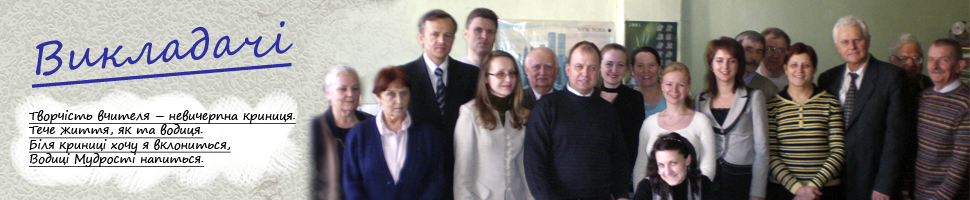
<style>
.page{position:relative;width:970px;height:200px}
.page>*{position:absolute;margin:0}
.t1{font:44px "SegoeScript";color:#2f2fa1;text-decoration:underline}
.t2{font:12px "SegoePrint";color:#000000;text-decoration:underline}
</style>
<div class="page">
<p class="t1" style="left:32px;top:21px;width:261px;height:67px;rotate:-5deg">Викладачі</p>
<p class="t2" style="left:29px;top:110px;width:267px;height:57px">Творчість вчителя – невичерпна криниця.<br>Тече життя, як та водиця.<br>Біля криниці хочу я вклониться,<br>Водиці Мудрості напиться.</p>
</div>
